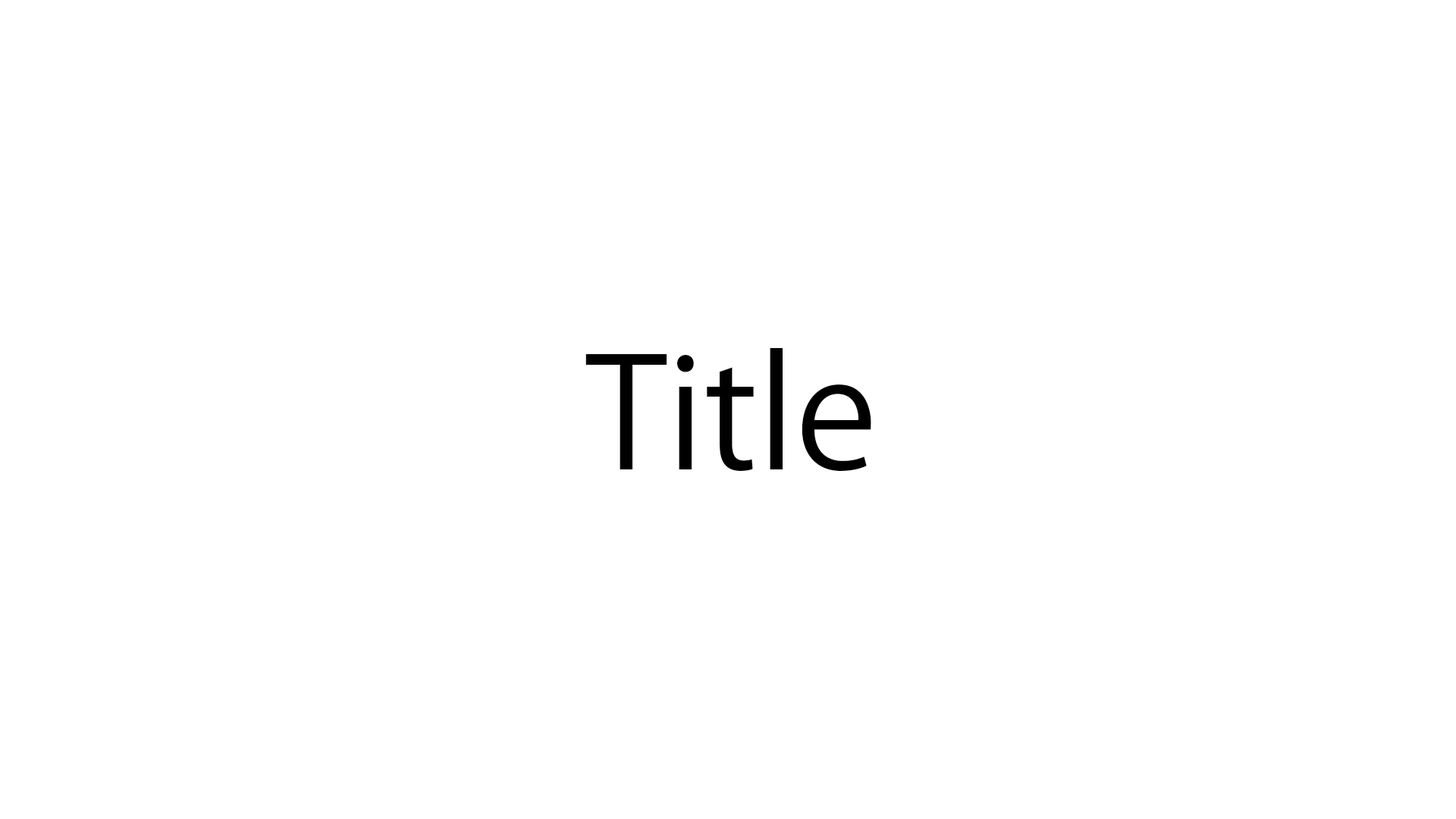
<style>
.page{position:relative;width:1456px;height:819px;background:#ffffff}
.page>*{position:absolute;margin:0}
.t1{font:151.7px "KozGoPr6N-Regular";color:#000000}
</style>
<div class="page">
<p class="t1" style="left:585px;top:348px;width:286px;height:123px">Title</p>
</div>
